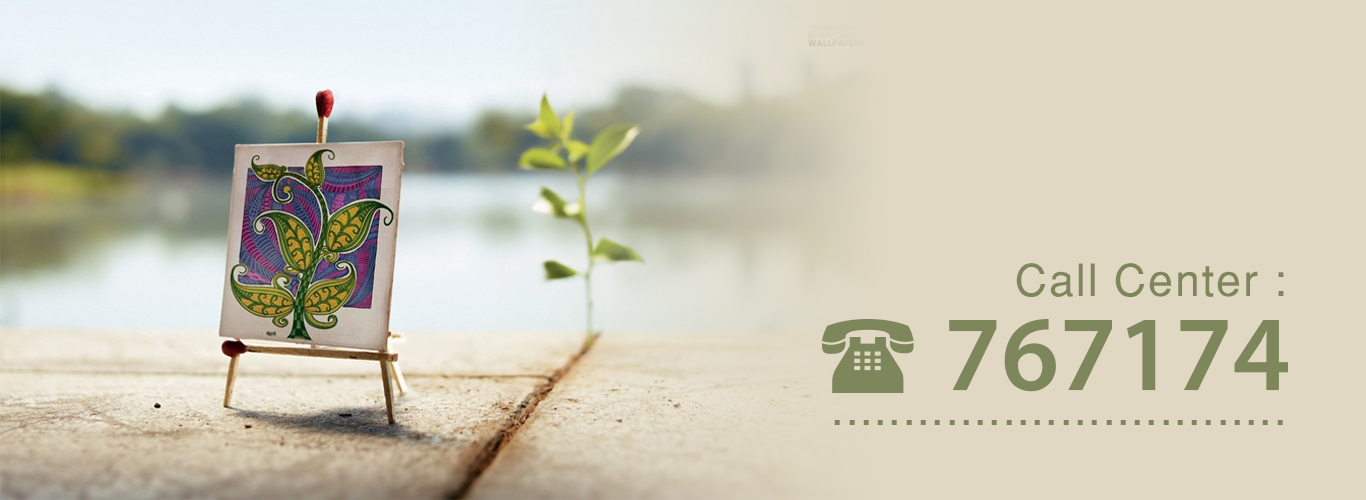
<style>
.page{position:relative;width:1366px;height:500px;background:#e0d8c3}
.page>*{position:absolute;margin:0}
.t1{font:44.5px "Helvetica-Normal";letter-spacing:0.045em;color:#7e875b}
</style>
<div class="page">
<p class="t1" style="left:1016px;top:263px;width:268px;height:34px">Call Center :</p>
<p class="t1" style="left:834px;top:420px;width:449px;height:5px">................................</p>
</div>
